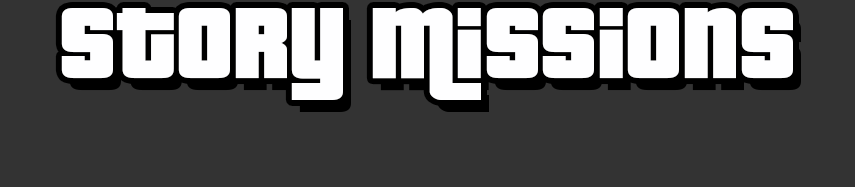
<style>
.page{position:relative;width:855px;height:187px;background:#333333}
.page>*{position:absolute;margin:0}
.t1{font:137.5px "Pricedown";color:#fefeff}
</style>
<div class="page">
<p class="t1" style="left:61px;top:8px;width:732px;height:92px">Story Missions</p>
</div>
